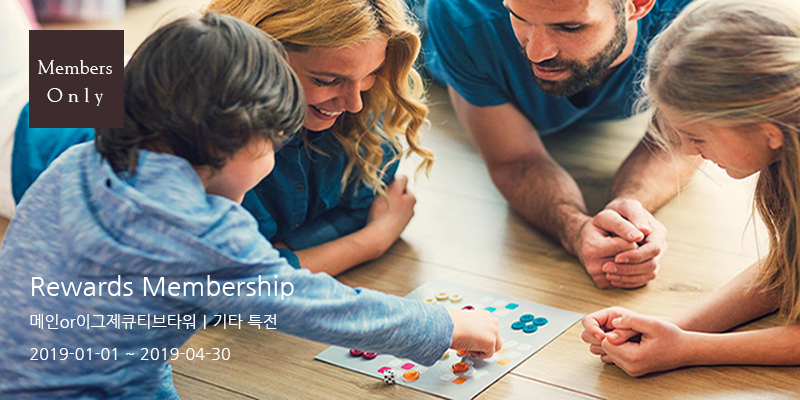
<style>
.page{position:relative;width:800px;height:400px}
.page>*{position:absolute;margin:0}
.t1{font:20px/28px "GoudyOlSt-BT";letter-spacing:0.01em;color:#ffffff}
.t2{font:16px/16px "NanumGothic";letter-spacing:0.01em;color:#ffffff}
.t3{font:26px/16px "NanumGothic";letter-spacing:0.01em;color:#ffffff}
</style>
<div class="page">
<p class="t1" style="left:38px;top:60px;width:74px;height:46px;text-align:center">Members<br>O n l y</p>
<p class="t2" style="left:30px;top:275px;width:264px;height:85px"><span class="t3">Rewards Membership<br><br></span>메인or이그제큐티브타워｜기타 특전<br><br>2019-01-01 ~ 2019-04-30</p>
</div>
